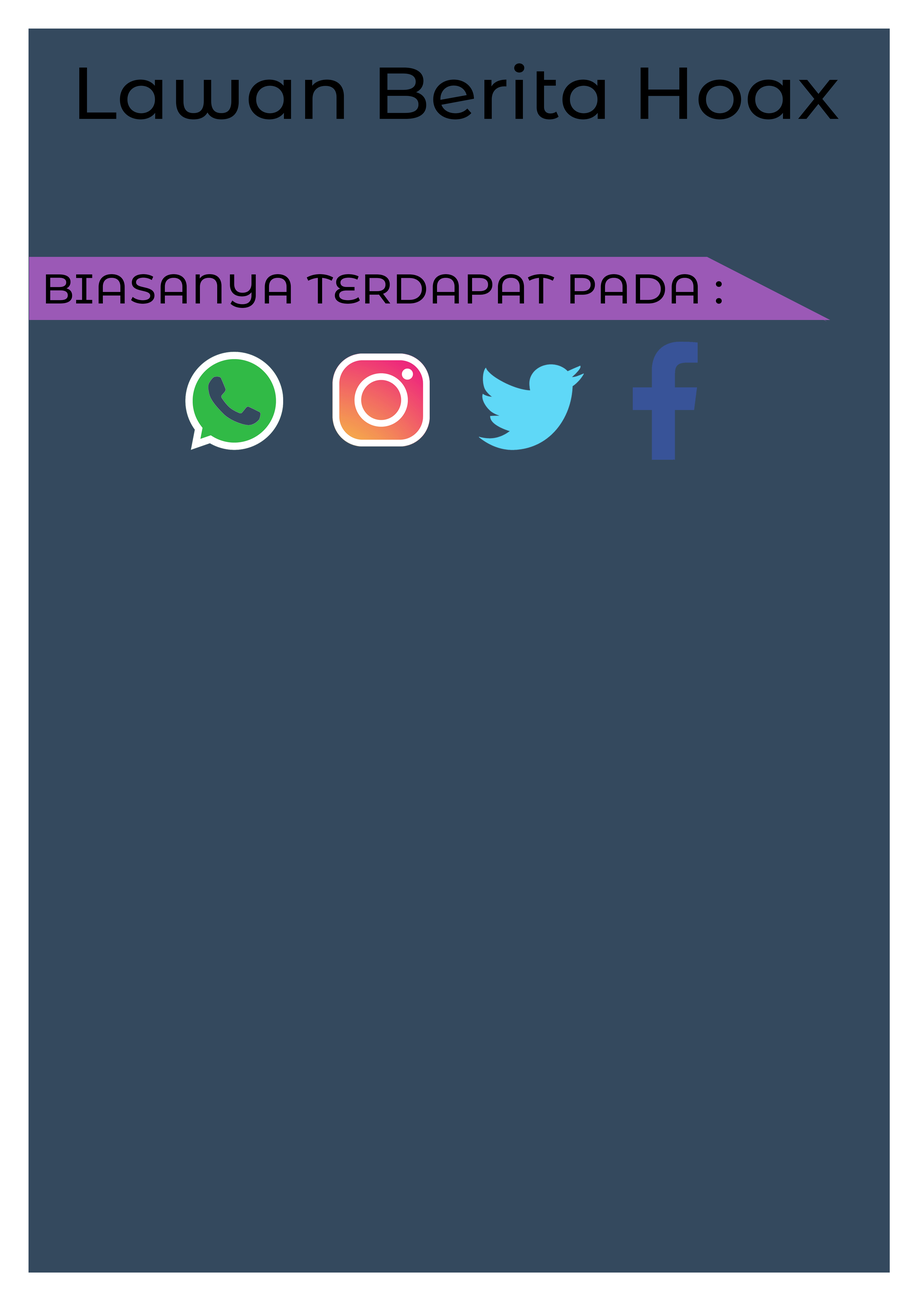
<style>
.page{position:relative;width:918px;height:1299px;background:#34495e}
.page>*{position:absolute;margin:0}
.t1{font:73.4px "MontserratAlternates-Medium";color:#000000;scale:1.05 1}
.t2{font:41.4px "MontserratAlternates-Medium";color:#000000;scale:1.05 1}
</style>
<div class="page">
<p class="t1" style="left:79px;top:63px;width:760px;height:56px">Lawan Berita Hoax</p>
<p class="t2" style="left:46px;top:274px;width:676px;height:34px">BIASANYA TERDAPAT PADA :</p>
</div>
